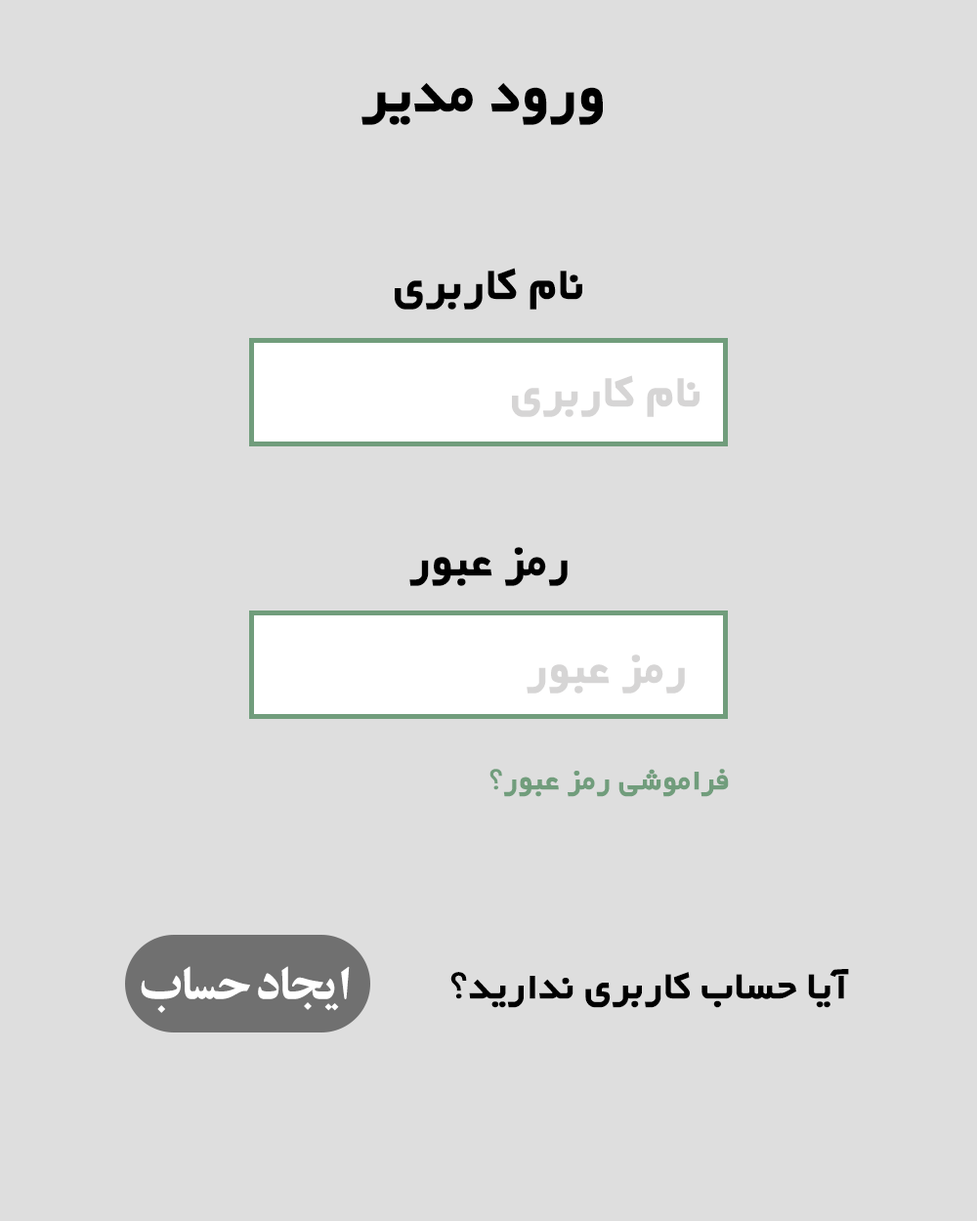
<style>
.page{position:relative;width:977px;height:1221px;background:#dedede}
.page>*{position:absolute;margin:0}
.t1{font:73.3px "WyekanBold";color:#000000}
.t2{font:57px "WyekanBold";color:#000000}
.t3{font:57px "WyekanBold";color:#d6d5d5}
.t4{font:37.9px "WyekanBold";color:#719d7c}
.t5{font:51.4px "BZarBold";letter-spacing:-0.025em;color:#ffffff}
.t6{font:48.8px "WyekanBold";color:#000000}
</style>
<div class="page">
<p class="t1" style="left:361px;top:83px;width:242px;height:42px">ورود مدیر</p>
<p class="t2" style="left:395px;top:268px;width:187px;height:42px">نام کاربری</p>
<p class="t3" style="left:512px;top:375px;width:187px;height:42px">نام کاربری</p>
<p class="t2" style="left:409px;top:547px;width:158px;height:39px">رمز عبور</p>
<p class="t3" style="left:526px;top:654px;width:159px;height:39px">رمز عبور</p>
<p class="t4" style="left:489px;top:769px;width:240px;height:28px">فراموشی رمز عبور؟</p>
<p class="t5" style="left:141px;top:966px;width:209px;height:47px">ایجاد حساب</p>
<p class="t6" style="left:450px;top:969px;width:399px;height:39px">آیا حساب کاربری ندارید؟</p>
</div>
